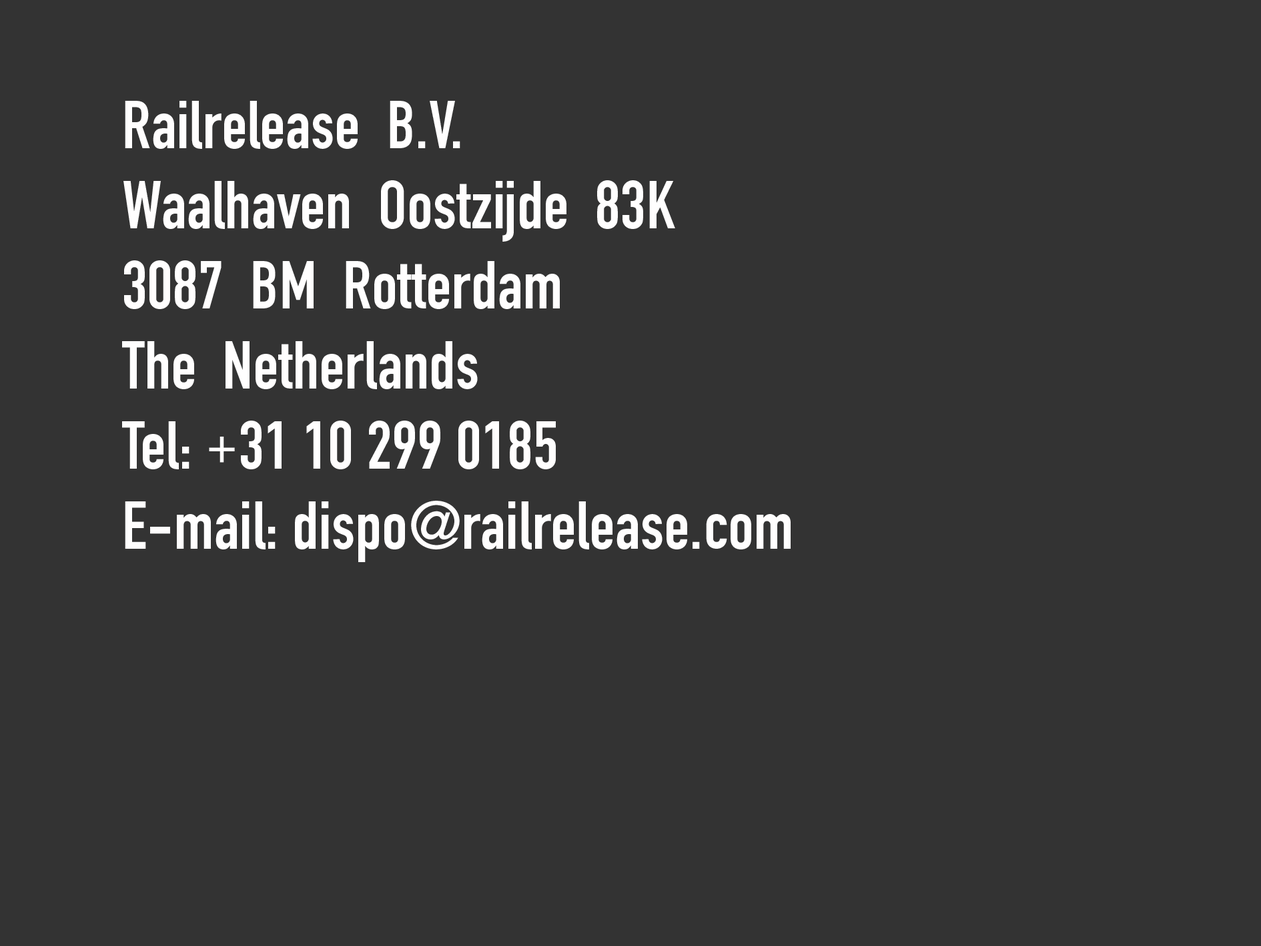
<style>
.page{position:relative;width:1261px;height:946px;background:#333333}
.page>*{position:absolute;margin:0}
.t1{font:66.7px "DINEngschriftLTPro";letter-spacing:0.01em;color:#fffefe}
.t2{font:66.7px "DINCondensedVF-Light";letter-spacing:0.01em;color:#fffefe}
</style>
<div class="page">
<p class="t1" style="left:122px;top:101px;width:669px;height:461px">Railrelease  B.V.<br>Waalhaven  Oostzijde  83K<br>3087  BM  Rotterdam<br>The  Netherlands<br>Tel: <span class="t2">+</span>31 10 299 0185<br>E-mail: dispo@railrelease.com</p>
</div>
